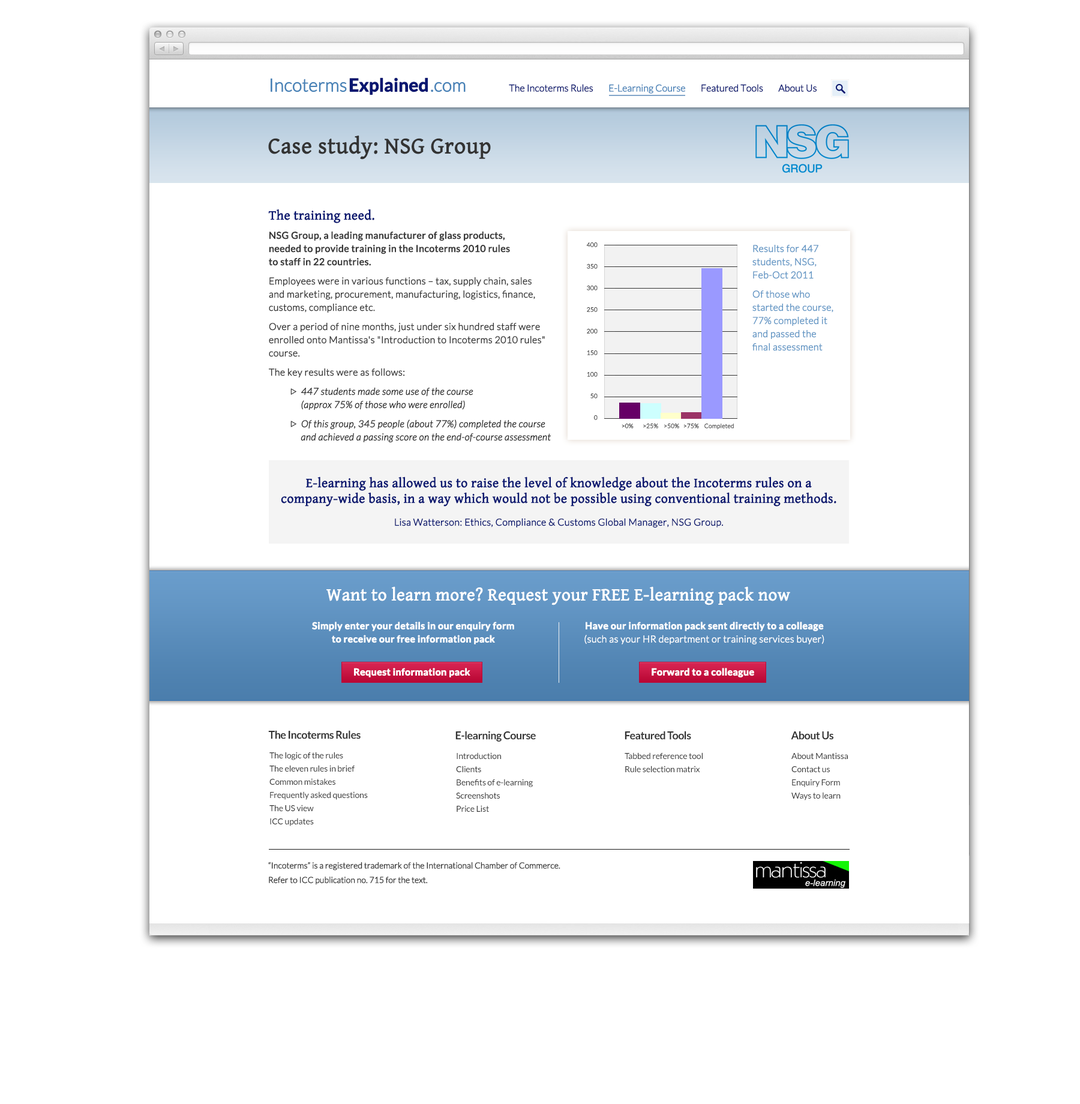
<style>
.page{position:relative;width:1080px;height:1104px;background:#ffffff}
.page>*{position:absolute;margin:0}
.t1{font:18px "Lato-Light";letter-spacing:-0.02em;color:#4983b7;font-weight:bold}
.t2{font:18px "Lato-Bold";letter-spacing:-0.02em;color:#091770;font-weight:bold}
.t3{font:18px "Lato-Light";letter-spacing:-0.02em;color:#4882b7;font-weight:bold}
.t4{font:14.4px "Lato-Regular";letter-spacing:-0.02em;color:#ffffff;font-weight:bold}
.t5{font:14.4px "Lato-Regular";letter-spacing:-0.02em;color:#ffffff;text-transform:uppercase;font-weight:bold}
.t6{font:9.6px "Lato-Light";letter-spacing:-0.02em;color:#091770;font-weight:bold}
.t7{font:9.6px "Lato-Light";letter-spacing:-0.02em;color:#4882b7;font-weight:bold}
.t8{font:22.8px "GentiumBasic";color:#333333;font-weight:bold}
.t9{font:25.9px "GentiumBasic";letter-spacing:-0.02em;color:#ffffff;text-transform:uppercase;font-weight:bold}
.t10{font:9.6px/13.2px "Lato-Light";color:#383838;font-weight:bold}
.t11{font:13.2px/13.2px "GentiumBasic";color:#091770;font-weight:bold}
.t12{font:9.6px/13.2px "Lato-Regular";color:#383838;font-weight:bold}
.t13{font:7.2px/13.2px "Wingdings3";color:#383838;font-weight:bold}
.t14{font:9.6px/13.2px "Lato-LightItalic";color:#313131;font-weight:bold}
.t15{font:6px/15.6px "Lato-Light";color:#383838;font-weight:bold}
.t16{font:9.6px/13.2px "Lato-Light";color:#6497c5;font-weight:bold}
.t17{font:6px "Lato-Light";color:#383838;font-weight:bold}
.t18{font:13.2px/15.6px "GentiumBasic";color:#091770;font-weight:bold}
.t19{font:13.2px/21.6px "GentiumBasic";color:#091770;font-weight:bold}
.t20{font:9.6px/16.8px "Lato-Light";color:#091770;font-weight:bold}
.t21{font:6px/15.6px "Wingdings3";color:#bc0937;font-weight:bold}
.t22{font:13.2px/21.6px "Lato-Regular";letter-spacing:-0.02em;color:#091770;font-weight:bold}
.t23{font:13.2px/21.6px "Lato-Regular";letter-spacing:-0.02em;color:#091770;text-transform:uppercase;font-weight:bold}
.t24{font:17.5px "GentiumBasic";color:#ffffff;font-weight:bold}
.t25{font:13.2px "GentiumBasic";letter-spacing:-0.02em;color:#ffffff;text-transform:uppercase;font-weight:bold}
.t26{font:9.6px/13.2px "Lato-Bold";color:#ffffff;font-weight:bold}
.t27{font:9.6px/13.2px "Lato-Light";color:#ffffff;font-weight:bold}
.t28{font:9.6px "Lato-Bold";color:#ffffff;font-weight:bold}
.t29{font:10.8px "Lato-Bold";letter-spacing:-0.03em;color:#333333}
.t30{font:8.4px/13.2px "Lato-Regular";letter-spacing:-0.01em;color:#333333}
.t31{font:8.4px/14.5px "Lato-Light";letter-spacing:-0.02em;color:#333333;font-weight:bold}
</style>
<div class="page">
<p class="t1" style="left:271px;top:77px;width:195px;height:18px">Incoterms<span class="t2">Explained</span><span class="t3">.com<br></span><span class="t4"><br></span><span class="t5"></span></p>
<p class="t6" style="left:509px;top:84px;width:308px;height:10px">The Incoterms Rules        <span class="t7">E-Learning Course</span>        Featured Tools        About Us</p>
<p class="t8" style="left:268px;top:135px;width:223px;height:25px">Case study: NSG Group<br><span class="t9"></span></p>
<p class="t10" style="left:268px;top:209px;width:283px;height:234px"><span class="t11">The training need.<br></span><span class="t12">NSG Group, a leading manufacturer of glass products, <br>needed to provide training in the Incoterms 2010 rules <br>to staff in 22 countries.<br></span>Employees were in various functions – tax, supply chain, sales <br>and marketing, procurement, manufacturing, logistics, finance, customs, compliance etc.<br>Over a period of nine months, just under six hundred staff were enrolled onto Mantissa's "Introduction to Incoterms 2010 rules" course.<br>The key results were as follows:<br> <span class="t13">w  </span><span class="t14">447 students made some use of the course <br>      (approx 75% of those who were enrolled)<br> </span><span class="t13">w  </span><span class="t14">Of this group, 345 people (about 77%) completed the course      <br>      and achieved a passing score on the end-of-course assessment</span></p>
<p class="t15" style="left:586px;top:242px;width:12px;height:178px;text-align:right">400<br>350<br>300<br>250<br>200<br>150<br>100<br>50<br>0</p>
<p class="t16" style="left:752px;top:245px;width:81px;height:106px">Results for 447 students, NSG, Feb-Oct 2011<br>Of those who <br>started the course, 77% completed it <br>and passed the <br>final assessment</p>
<p class="t17" style="left:622px;top:424px;width:112px;height:6px">&gt;0%       &gt;25%    &gt;50%   &gt;75%    Completed</p>
<p class="t18" style="left:281px;top:476px;width:555px;height:52px;text-align:center"><span class="t19">E-learning has allowed us to raise the level of knowledge about the Incoterms rules on a </span>company-wide basis, in a way which would not be possible using conventional training methods.<br><span class="t20">Lisa Watterson: Ethics, Compliance &amp; Customs Global Manager, NSG Group.<br></span><span class="t21"><br></span><span class="t22"><br></span><span class="t23"></span></p>
<p class="t24" style="left:326px;top:586px;width:464px;height:19px">Want to learn more? Request your FREE E-learning pack now<br><span class="t25"></span></p>
<p class="t26" style="left:312px;top:622px;width:202px;height:22px;text-align:center">Simply enter your details in our enquiry form <br>to receive our free information pack</p>
<p class="t27" style="left:584px;top:622px;width:240px;height:22px;text-align:center"><span class="t26">Have our information pack sent directly to a colleage<br></span>(such as your HR department or training services buyer)</p>
<p class="t28" style="left:354px;top:668px;width:116px;height:9px">Request information pack</p>
<p class="t28" style="left:652px;top:668px;width:102px;height:9px">Forward to a colleague</p>
<p class="t29" style="left:268px;top:730px;width:93px;height:9px">The Incoterms Rules</p>
<p class="t29" style="left:455px;top:731px;width:81px;height:11px">E-learning Course</p>
<p class="t29" style="left:625px;top:731px;width:66px;height:9px">Featured Tools</p>
<p class="t29" style="left:791px;top:731px;width:42px;height:9px">About Us</p>
<p class="t30" style="left:269px;top:752px;width:99px;height:74px">The logic of the rules<br>The eleven rules in brief<br>Common mistakes<br>Frequently asked questions<br>The US view<br>ICC updates</p>
<p class="t30" style="left:456px;top:752px;width:77px;height:60px">Introduction<br>Clients<br>Benefits of e-learning<br>Screenshots<br>Price List</p>
<p class="t30" style="left:625px;top:752px;width:78px;height:20px">Tabbed reference tool <br>Rule selection matrix</p>
<p class="t30" style="left:791px;top:752px;width:57px;height:48px">About Mantissa<br>Contact us<br>Enquiry Form<br>Ways to learn</p>
<p class="t31" style="left:268px;top:862px;width:292px;height:23px">“Incoterms” is a registered trademark of the International Chamber of Commerce. <br>Refer to ICC publication no. 715 for the text.</p>
</div>
